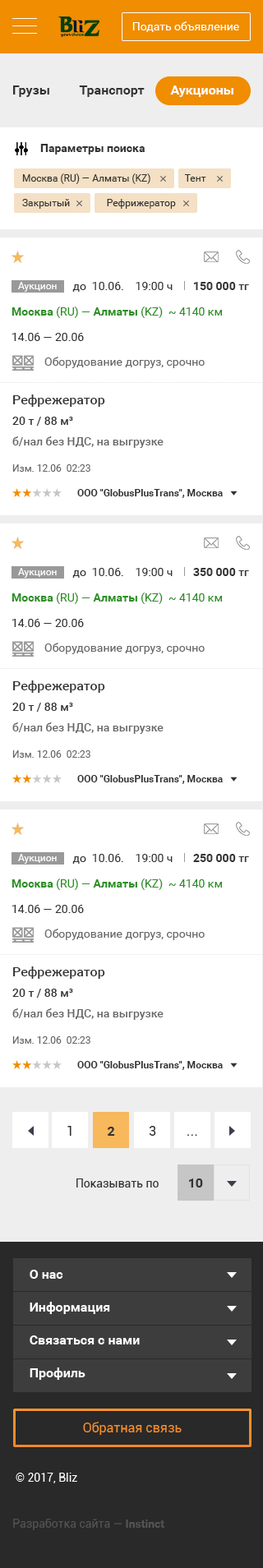
<style>
.page{position:relative;width:263px;height:1568px;background:#ffffff}
.page>*{position:absolute;margin:0}
.t1{font:13.1px "Roboto-Bold";color:#333333}
.t2{font:13.1px "Roboto-Bold";color:#ffffff}
.t3{font:11.5px "Roboto-Bold";color:#333333}
.t4{font:9.9px/16.4px "Roboto-Regular";color:#333333}
.t5{font:9.9px "Roboto-Regular";color:#ffffff}
.t6{font:11.5px "Roboto-Regular";color:#333333}
.t7{font:11.5px "Roboto-Medium";color:#333333}
.t8{font:11.5px/16.4px "Roboto-Regular";color:#666666}
.t9{font:11.5px/21.4px "Roboto-Bold";color:#2a8f22}
.t10{font:11.5px/21.4px "Roboto-Regular";color:#2a8f22}
.t11{font:11.5px/21.4px "Roboto-Regular";color:#333333}
.t12{font:11.5px/16.4px "Roboto-Medium";color:#666666}
.t13{font:13.1px/16.4px "Roboto-Medium";color:#333333}
.t14{font:11.5px/16.4px "Roboto-Medium";color:#333333}
.t15{font:9.9px "Roboto-Regular";color:#666666}
.t16{font:9.9px "Roboto-Bold";color:#303030}
</style>
<div class="page">
<p class="t1" style="left:13px;top:85px;width:220px;height:12px">Грузы         Транспорт       <span class="t2"> Аукционы</span></p>
<p class="t3" style="left:40px;top:144px;width:105px;height:10px">Параметры поиска</p>
<p class="t4" style="left:22px;top:173px;width:184px;height:36px">Москва (RU) — Алматы (KZ)              Тент               <br>Закрытый               Рефрижератор</p>
<p class="t5" style="left:18px;top:282px;width:39px;height:10px">Аукцион</p>
<p class="t6" style="left:72px;top:282px;width:101px;height:10px">до  10.06.    19:00 ч</p>
<p class="t3" style="left:194px;top:282px;width:55px;height:8px">150 000<span class="t7"> тг</span></p>
<p class="t8" style="left:12px;top:307px;width:210px;height:61px"><span class="t9">Москва</span><span class="t10"> (RU) — </span><span class="t9">Алматы</span><span class="t10"> (KZ)  ~ 4140 км<br></span><span class="t11">14.06 — 20.06<br></span>Оборудование догруз, срочно</p>
<p class="t12" style="left:12px;top:394px;width:152px;height:54px"><span class="t13">Рефрежератор<br></span><span class="t14">20 т / 88 м³<br></span>б/нал без НДС, на выгрузке</p>
<p class="t15" style="left:12px;top:464px;width:78px;height:8px">Изм. 12.06  02:23</p>
<p class="t16" style="left:77px;top:489px;width:146px;height:9px">ООО "GlobusPlusTrans", Москва</p>
<p class="t5" style="left:18px;top:568px;width:39px;height:10px">Аукцион</p>
<p class="t6" style="left:72px;top:568px;width:101px;height:10px">до  10.06.    19:00 ч</p>
<p class="t3" style="left:193px;top:568px;width:56px;height:8px">350 000<span class="t7"> тг</span></p>
<p class="t8" style="left:12px;top:593px;width:210px;height:61px"><span class="t9">Москва</span><span class="t10"> (RU) — </span><span class="t9">Алматы</span><span class="t10"> (KZ)  ~ 4140 км<br></span><span class="t11">14.06 — 20.06<br></span>Оборудование догруз, срочно</p>
<p class="t12" style="left:12px;top:680px;width:152px;height:54px"><span class="t13">Рефрежератор<br></span><span class="t14">20 т / 88 м³<br></span>б/нал без НДС, на выгрузке</p>
<p class="t15" style="left:12px;top:750px;width:78px;height:8px">Изм. 12.06  02:23</p>
<p class="t16" style="left:77px;top:775px;width:146px;height:9px">ООО "GlobusPlusTrans", Москва</p>
<p class="t5" style="left:18px;top:854px;width:39px;height:10px">Аукцион</p>
<p class="t6" style="left:72px;top:854px;width:101px;height:10px">до  10.06.    19:00 ч</p>
<p class="t3" style="left:193px;top:854px;width:56px;height:8px">250 000<span class="t7"> тг</span></p>
<p class="t8" style="left:12px;top:879px;width:210px;height:61px"><span class="t9">Москва</span><span class="t10"> (RU) — </span><span class="t9">Алматы</span><span class="t10"> (KZ)  ~ 4140 км<br></span><span class="t11">14.06 — 20.06<br></span>Оборудование догруз, срочно</p>
<p class="t12" style="left:12px;top:966px;width:152px;height:54px"><span class="t13">Рефрежератор<br></span><span class="t14">20 т / 88 м³<br></span>б/нал без НДС, на выгрузке</p>
<p class="t15" style="left:12px;top:1036px;width:78px;height:8px">Изм. 12.06  02:23</p>
<p class="t16" style="left:77px;top:1061px;width:146px;height:9px">ООО "GlobusPlusTrans", Москва</p>
</div>
